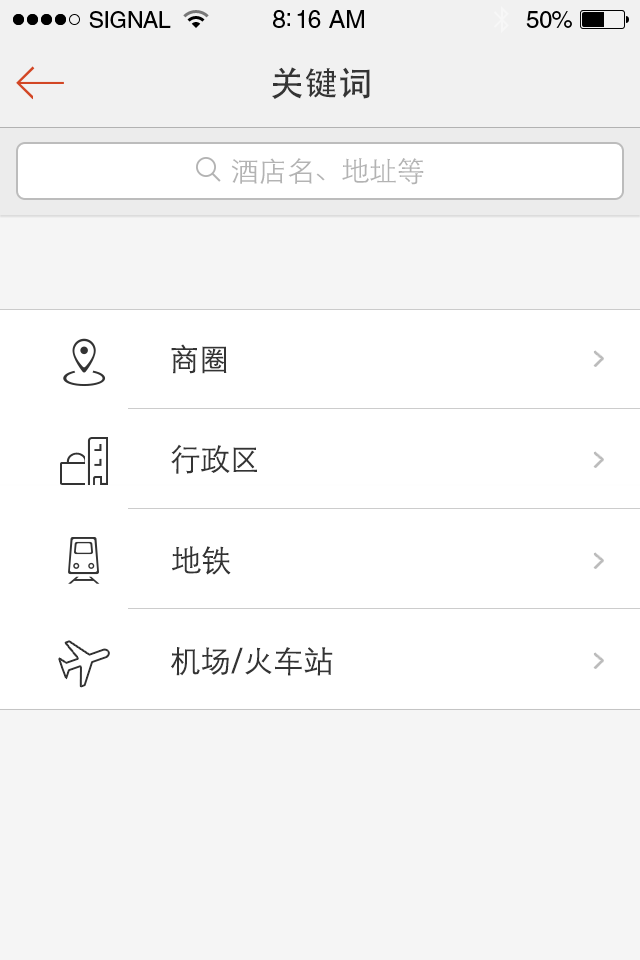
<style>
.page{position:relative;width:640px;height:960px;background:#ffffff}
.page>*{position:absolute;margin:0}
.t1{font:34px "STHeitiSC-Medium";color:#343434}
.t2{font:28px "STHeitiSC-Light";letter-spacing:-0.01em;color:#b3b3b3}
.t3{font:30.7px "STHeitiSC-Light";color:#343434}
</style>
<div class="page">
<p class="t1" style="left:272px;top:67px;width:98px;height:32px">关键词</p>
<p class="t2" style="left:231px;top:158px;width:193px;height:27px">酒店名、地址等</p>
<p class="t3" style="left:171px;top:344px;width:56px;height:30px">商圈</p>
<p class="t3" style="left:171px;top:444px;width:86px;height:30px">行政区</p>
<p class="t3" style="left:172px;top:546px;width:59px;height:29px">地铁</p>
<p class="t3" style="left:171px;top:647px;width:162px;height:29px">机场/火车站</p>
</div>
